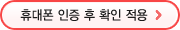
<style>
.page{position:relative;width:180px;height:30px;background:#fff3f3}
.page>*{position:absolute;margin:0}
.t1{font:13.2px "YDIYGO330";color:#1c1c1c;scale:0.91 1}
</style>
<div class="page">
<p class="t1" style="left:20px;top:9px;width:128px;height:12px">휴대폰 인증 후 확인 적용</p>
</div>
